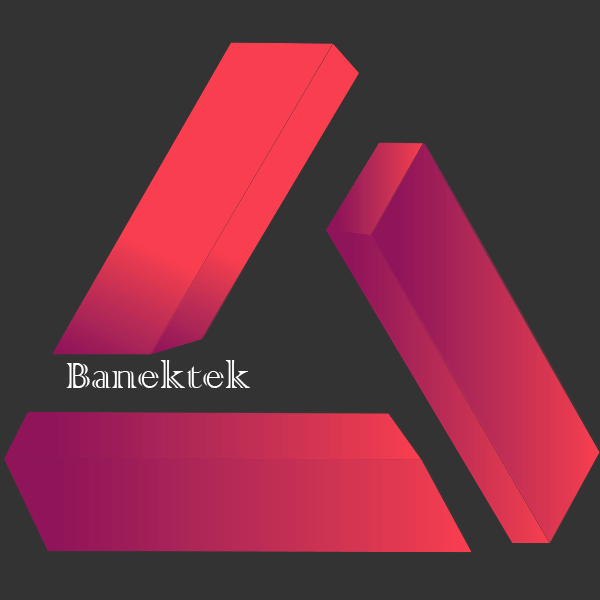
<style>
.page{position:relative;width:600px;height:600px;background:#333333}
.page>*{position:absolute;margin:0}
.t1{font:48px "ColonnaMT";color:#ffffff}
</style>
<div class="page">
<p class="t1" style="left:66px;top:360px;width:184px;height:28px">Banektek</p>
</div>
